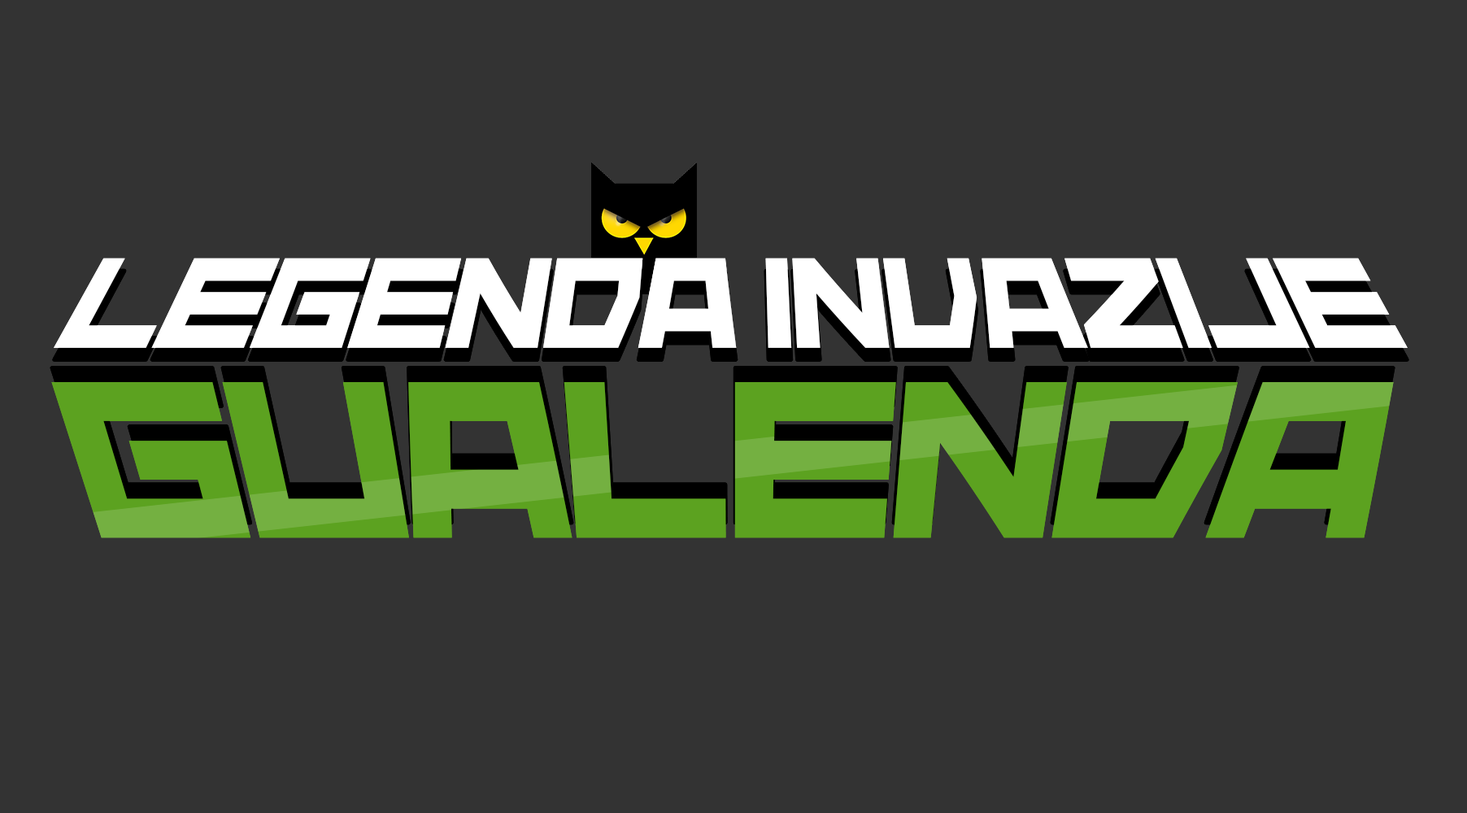
<style>
.page{position:relative;width:1467px;height:813px;background:#333333}
.page>*{position:absolute;margin:0}
.t1{font:113.8px "Heartisan";color:#ffffff}
.t2{font:197.9px "Heartisan";color:#5ca220}
</style>
<div class="page">
<p class="t1" style="left:54px;top:258px;width:1353px;height:90px">LEGENDA INVAZIJE</p>
<p class="t2" style="left:51px;top:382px;width:1343px;height:156px">GUALENDA</p>
</div>
